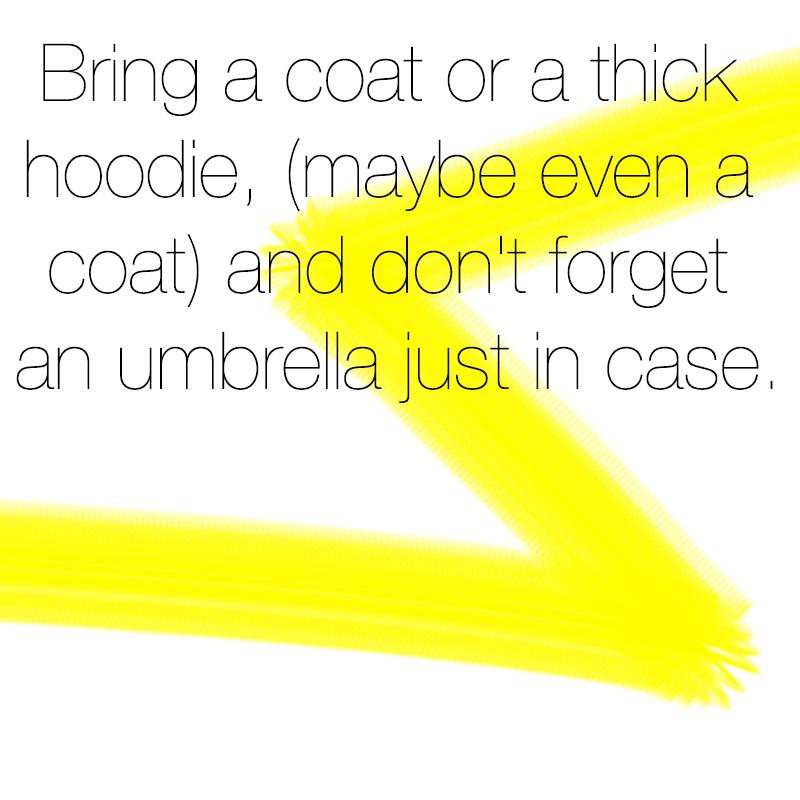
<style>
.page{position:relative;width:800px;height:800px;background:#ffffff}
.page>*{position:absolute;margin:0}
.t1{font:80px "HelveticaNeue-UltraLight";color:#000000}
</style>
<div class="page">
<p class="t1" style="left:16px;top:43px;width:757px;height:360px;text-align:center">Bring a coat or a thick <br>hoodie, (maybe even a <br>coat) and don't forget <br>an umbrella just in case.</p>
</div>
